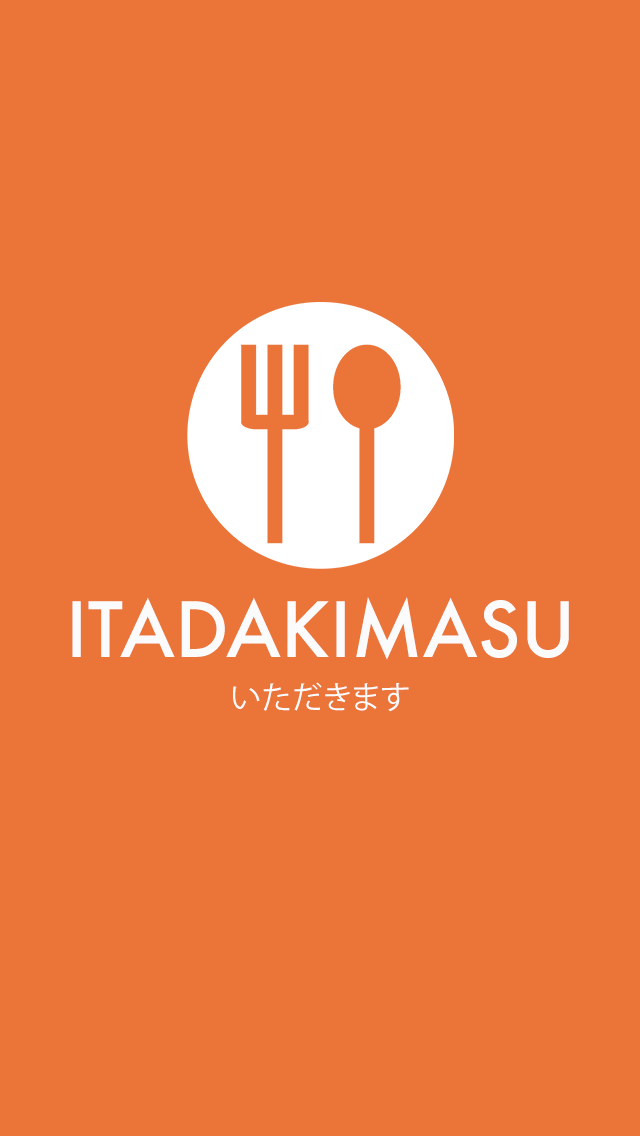
<style>
.page{position:relative;width:640px;height:1136px;background:#eb7439}
.page>*{position:absolute;margin:0}
.t1{font:74px "Futura-Medium";color:#fbfbfb}
.t2{font:30.8px "KozGoPr6N-Regular";color:#fbfbfb}
</style>
<div class="page">
<p class="t1" style="left:72px;top:597px;width:497px;height:63px">ITADAKIMASU</p>
<p class="t2" style="left:233px;top:682px;width:176px;height:30px">いただきます</p>
</div>
